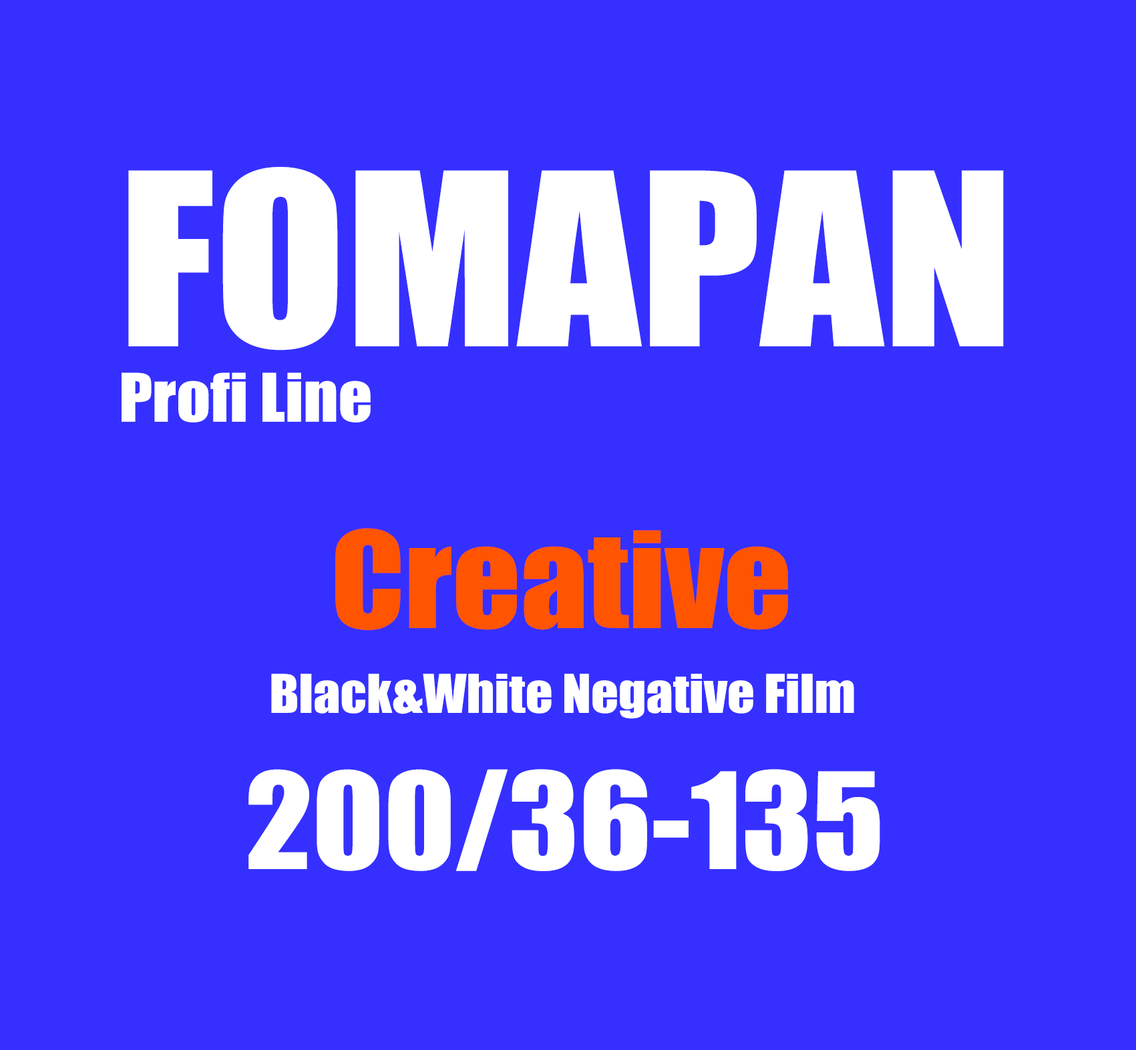
<style>
.page{position:relative;width:1136px;height:1050px;background:#3530ff}
.page>*{position:absolute;margin:0}
.t1{font:222.2px "Impact";color:#ffffff;scale:1.08 1}
.t2{font:61.7px "Impact";color:#ffffff;scale:1.08 1}
.t3{font:123.4px "Impact";color:#ff5400;scale:1.08 1}
.t4{font:49.4px "Impact";color:#ffffff;scale:1.08 1}
.t5{font:123.4px "Impact";color:#ffffff;scale:1.08 1}
</style>
<div class="page">
<p class="t1" style="left:128px;top:167px;width:875px;height:183px">FOMAPAN</p>
<p class="t2" style="left:121px;top:373px;width:250px;height:50px">Profi Line</p>
<p class="t3" style="left:335px;top:528px;width:453px;height:102px">Creative</p>
<p class="t4" style="left:271px;top:674px;width:583px;height:45px">Black&amp;White Negative Film</p>
<p class="t5" style="left:248px;top:769px;width:632px;height:102px">200/36-135</p>
</div>
